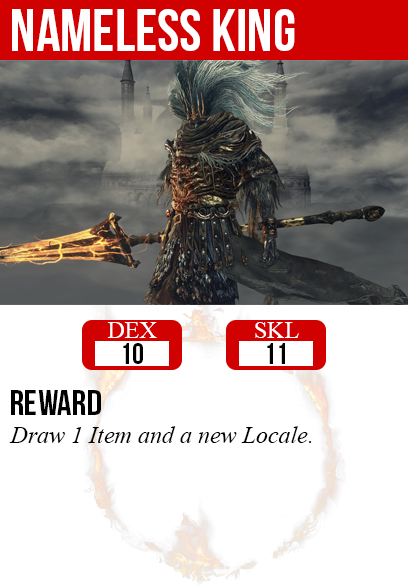
<style>
.page{position:relative;width:408px;height:585px;background:#ffffff}
.page>*{position:absolute;margin:0}
.t1{font:60px "BebasNeue";color:#ffffff}
.t2{font:24px "TimesNewRomanPSMT";color:#ffffff}
.t3{font:30px "BebasNeue";color:#000000}
.t4{font:36px "BebasNeue";color:#000000}
.t5{font:24px "TimesNewRomanPS-ItalicMT";color:#000000}
</style>
<div class="page">
<p class="t1" style="left:12px;top:9px;width:283px;height:42px">nameless king</p>
<p class="t2" style="left:107px;top:322px;width:50px;height:16px">DEX</p>
<p class="t2" style="left:255px;top:322px;width:44px;height:16px">SKL</p>
<p class="t3" style="left:123px;top:343px;width:20px;height:21px">10</p>
<p class="t3" style="left:267px;top:343px;width:18px;height:21px">11</p>
<p class="t4" style="left:11px;top:390px;width:90px;height:25px">reward</p>
<p class="t5" style="left:9px;top:426px;width:303px;height:17px">Draw 1 Item and a new Locale.</p>
</div>
